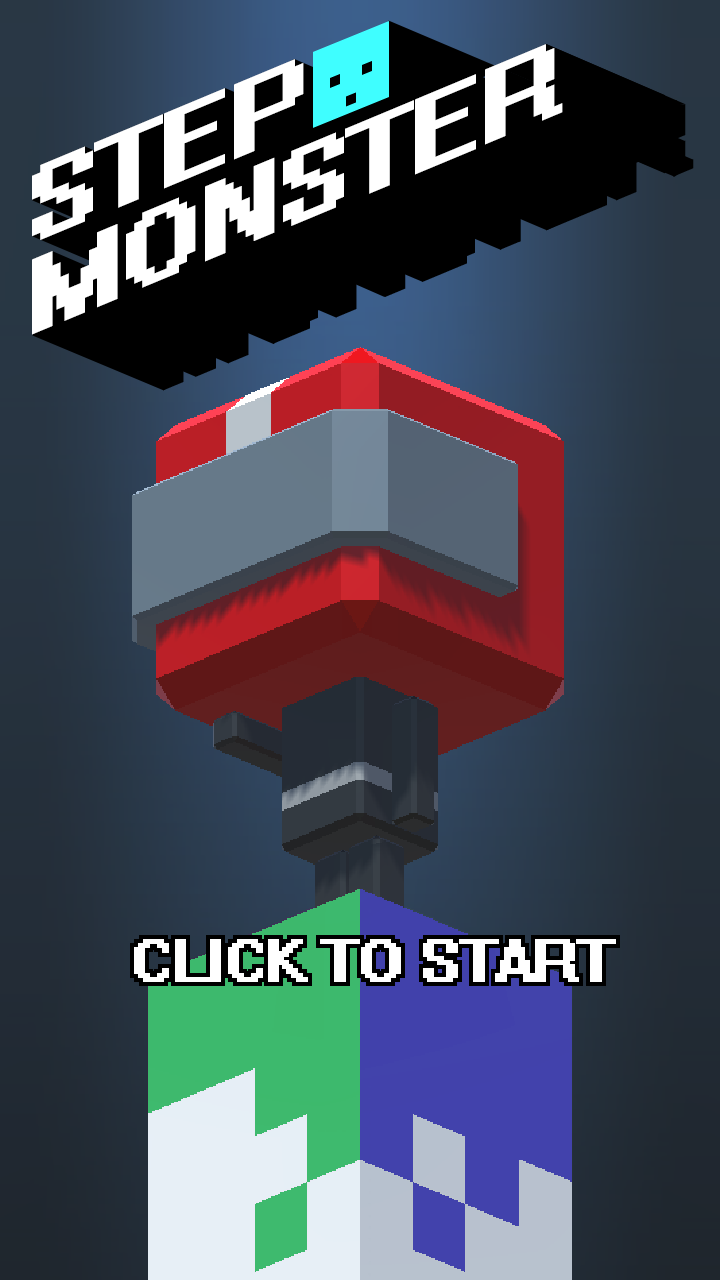
<style>
.page{position:relative;width:720px;height:1280px}
.page>*{position:absolute;margin:0}
.t1{font:117px/90px "System";letter-spacing:-0.025em;color:#ffffff;text-transform:uppercase;font-weight:bold;scale:1.2 1}
.t2{font:67.5px "System";letter-spacing:-0.025em;color:#ffffff;text-transform:uppercase;font-weight:bold;scale:1.11 1}
</style>
<div class="page">
<p class="t1" style="left:32px;top:44px;width:531px;height:291px;rotate:-23deg">STEP<br>monster</p>
<p class="t2" style="left:134px;top:939px;width:482px;height:43px">click to start</p>
</div>
